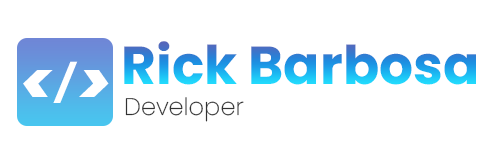
<style>
.page{position:relative;width:497px;height:164px;background:#ffffff}
.page>*{position:absolute;margin:0}
.t1{font:53.4px "Poppins-Bold"}
.t2{font:36px "Poppins-ExtraBoldItalic";color:#ffffff}
.t3{font:62.2px "Poppins-ExtraBoldItalic";color:#ffffff}
.t4{font:24px "Poppins-ExtraLight";color:#323232}
</style>
<div class="page">
<p class="t1" style="left:124px;top:41px;width:352px;height:44px">Rick Barbosa</p>
<p class="t2" style="left:53px;top:61px;width:25px;height:42px">/</p>
<p class="t3" style="left:23px;top:70px;width:86px;height:27px">&lt;  &gt;</p>
<p class="t4" style="left:125px;top:97px;width:119px;height:25px">Developer</p>
</div>
